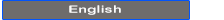
<style>
.page{position:relative;width:224px;height:20px;background:#6e6c6c}
.page>*{position:absolute;margin:0}
.t1{font:10.2px "ArialRoundedMTBold";color:#fcfcfc;scale:1.47 1}
</style>
<div class="page">
<p class="t1" style="left:69px;top:5px;width:52px;height:10px">English</p>
</div>
